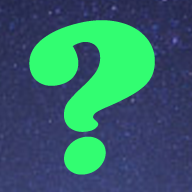
<style>
.page{position:relative;width:192px;height:192px;background:#32fd71}
.page>*{position:absolute;margin:0}
.t1{font:205.9px "Shrikhand-Regular";letter-spacing:0.07em;color:#32fd71}
</style>
<div class="page">
<p class="t1" style="left:29px;top:20px;width:126px;height:155px;rotate:-13deg">?</p>
</div>
